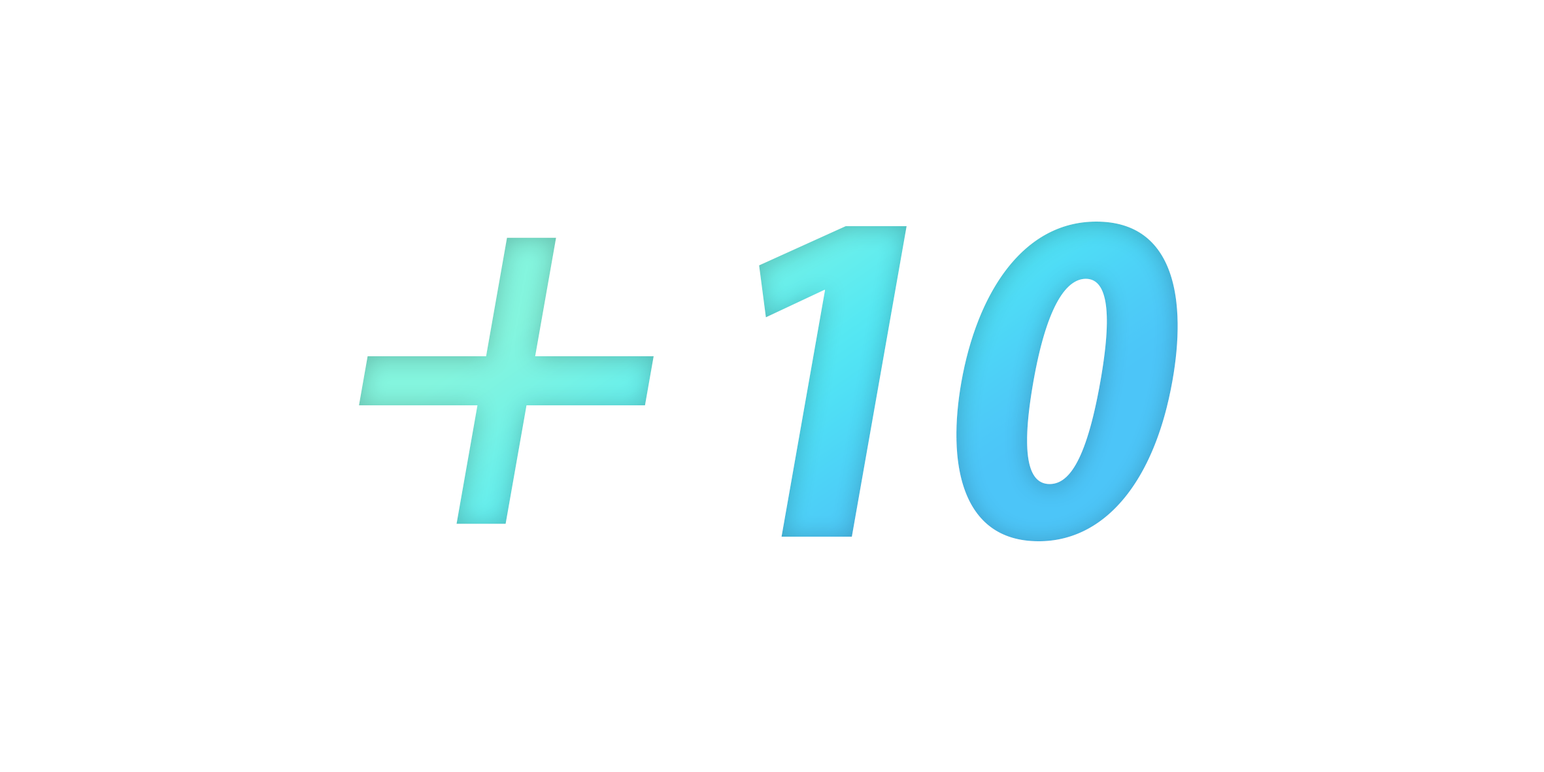
<style>
.page{position:relative;width:1544px;height:772px;background:#ffffff}
.page>*{position:absolute;margin:0}
.t1{font:408.6px "KozGoPro-Heavy";font-style:italic}
</style>
<div class="page">
<p class="t1" style="left:359px;top:222px;width:819px;height:319px">＋10</p>
</div>
